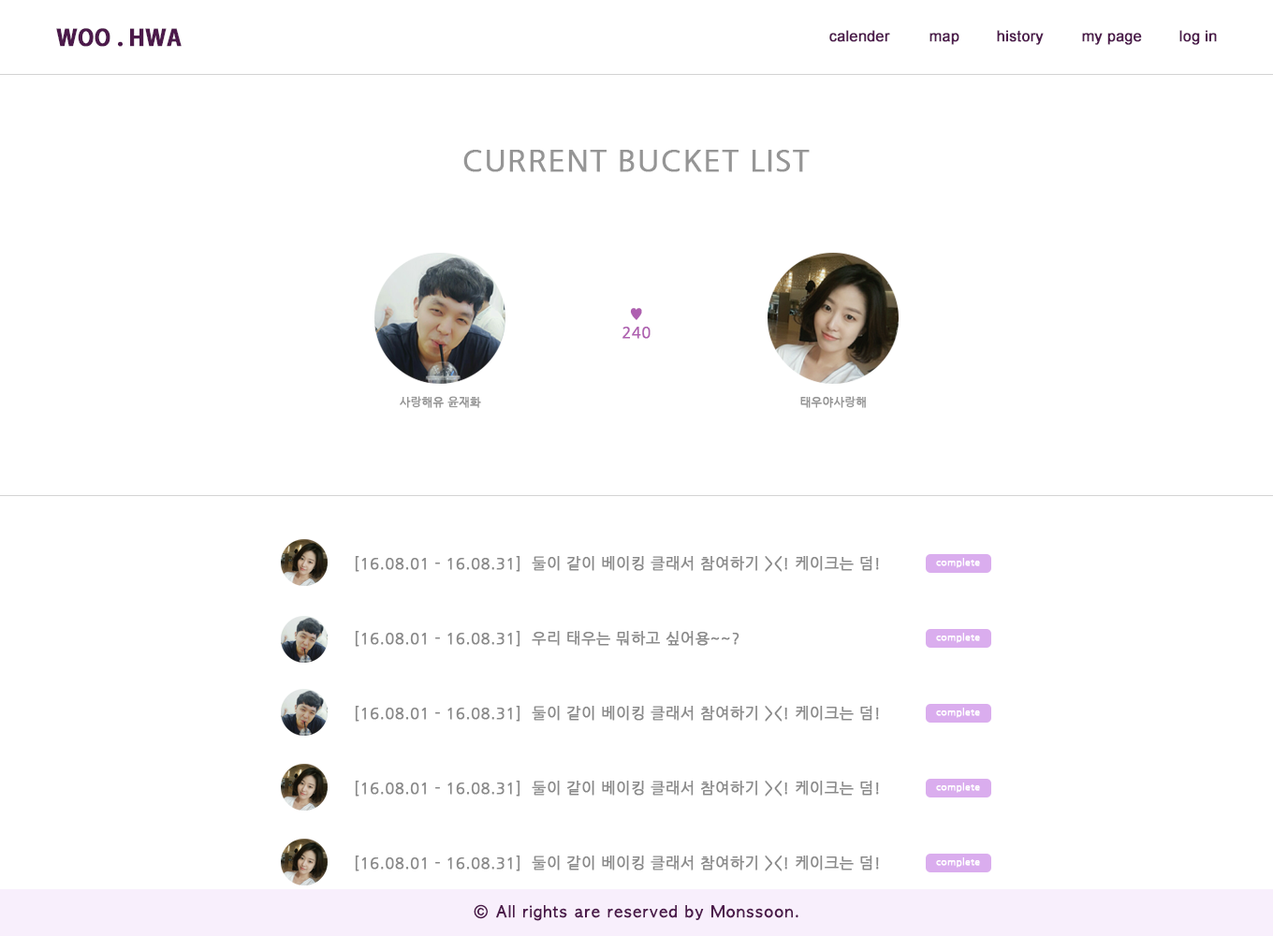
<style>
.page{position:relative;width:1273px;height:936px;background:#ffffff}
.page>*{position:absolute;margin:0}
.t1{font:22.5px "AdobeGothicStd-Bold";color:#4c1a4b;font-weight:bold}
.t2{font:15px "ArialMT";color:#4c1a4b;font-weight:bold}
.t3{font:30px "NanumGothic";letter-spacing:0.025em;color:#959595;font-weight:bold}
.t4{font:15px/18.7px "NanumGothic";letter-spacing:0.025em;color:#ae5fb0;font-weight:bold}
.t5{font:11.2px "NanumGothic";letter-spacing:0.025em;color:#959595;font-weight:bold}
.t6{font:15px "NanumGothic";letter-spacing:0.025em;color:#898989;font-weight:bold}
.t7{font:9.4px "NanumGothic";letter-spacing:0.025em;color:#ffffff;font-weight:bold}
.t8{font:15px "AppleGothic";letter-spacing:0.075em;color:#4c1a4b;font-weight:bold}
</style>
<div class="page">
<p class="t1" style="left:56px;top:28px;width:126px;height:19px">WOO . HWA</p>
<p class="t2" style="left:830px;top:30px;width:60px;height:12px">calender</p>
<p class="t2" style="left:997px;top:30px;width:47px;height:15px">history</p>
<p class="t2" style="left:1180px;top:30px;width:37px;height:15px">log in</p>
<p class="t2" style="left:930px;top:33px;width:30px;height:12px">map</p>
<p class="t2" style="left:1082px;top:33px;width:60px;height:12px">my page</p>
<p class="t3" style="left:464px;top:150px;width:346px;height:22px">CURRENT BUCKET LIST</p>
<p class="t4" style="left:623px;top:308px;width:28px;height:31px;text-align:center">♥<br>240</p>
<p class="t5" style="left:400px;top:396px;width:81px;height:12px">사랑해유 윤재화</p>
<p class="t5" style="left:801px;top:396px;width:65px;height:12px">태우야사랑해</p>
<p class="t6" style="left:355px;top:556px;width:524px;height:16px">[16.08.01 - 16.08.31]  둘이 같이 베이킹 클래서 참여하기 &gt;&lt;! 케이크는 덤!</p>
<p class="t7" style="left:936px;top:558px;width:44px;height:10px">complete</p>
<p class="t6" style="left:355px;top:631px;width:385px;height:16px">[16.08.01 - 16.08.31]  우리 태우는 뭐하고 싶어용~~?</p>
<p class="t7" style="left:936px;top:633px;width:44px;height:10px">complete</p>
<p class="t6" style="left:355px;top:706px;width:524px;height:16px">[16.08.01 - 16.08.31]  둘이 같이 베이킹 클래서 참여하기 &gt;&lt;! 케이크는 덤!</p>
<p class="t7" style="left:936px;top:708px;width:44px;height:10px">complete</p>
<p class="t6" style="left:355px;top:781px;width:524px;height:16px">[16.08.01 - 16.08.31]  둘이 같이 베이킹 클래서 참여하기 &gt;&lt;! 케이크는 덤!</p>
<p class="t7" style="left:936px;top:783px;width:44px;height:10px">complete</p>
<p class="t6" style="left:355px;top:856px;width:524px;height:16px">[16.08.01 - 16.08.31]  둘이 같이 베이킹 클래서 참여하기 &gt;&lt;! 케이크는 덤!</p>
<p class="t7" style="left:936px;top:858px;width:44px;height:10px">complete</p>
<p class="t8" style="left:474px;top:905px;width:325px;height:16px">© All rights are reserved by Monssoon.</p>
</div>
